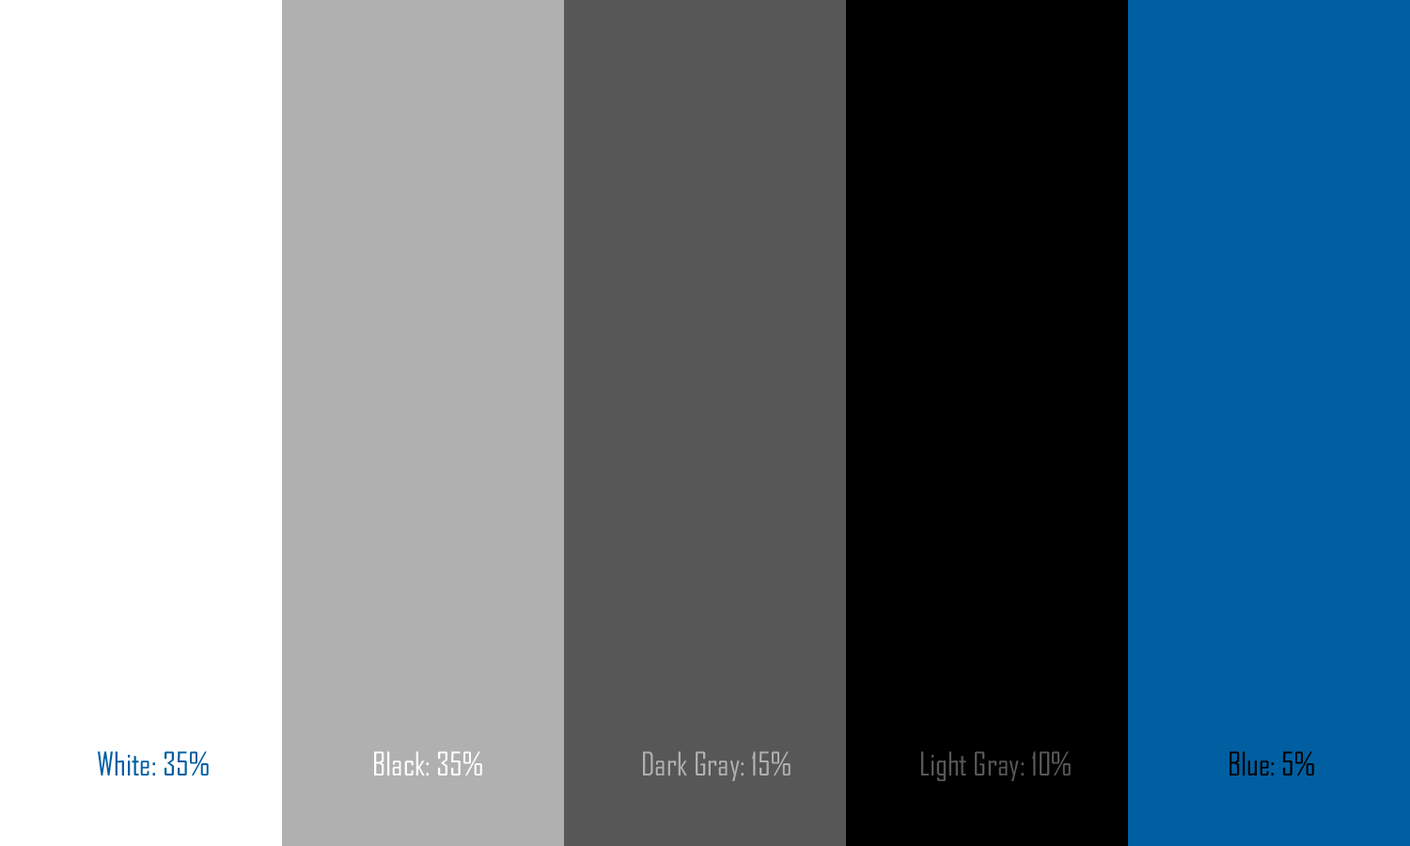
<style>
.page{position:relative;width:1410px;height:846px;background:#ffffff}
.page>*{position:absolute;margin:0}
.t1{font:31.3px "AgencyFB-Reg";color:#005fa1}
.t2{font:31.3px "AgencyFB-Reg";color:#ffffff}
.t3{font:31.3px "AgencyFB-Reg";color:#b0b0b0}
.t4{font:31.3px "AgencyFB-Reg";color:#575757}
.t5{font:31.3px "AgencyFB-Reg";color:#000000}
</style>
<div class="page">
<p class="t1" style="left:98px;top:751px;width:111px;height:24px">White: 35%</p>
<p class="t2" style="left:374px;top:751px;width:108px;height:24px">Black: 35%</p>
<p class="t3" style="left:643px;top:751px;width:147px;height:30px">Dark Gray: 15%</p>
<p class="t4" style="left:921px;top:751px;width:149px;height:30px">Light Gray: 10%</p>
<p class="t5" style="left:1229px;top:751px;width:85px;height:24px">Blue: 5%</p>
</div>
